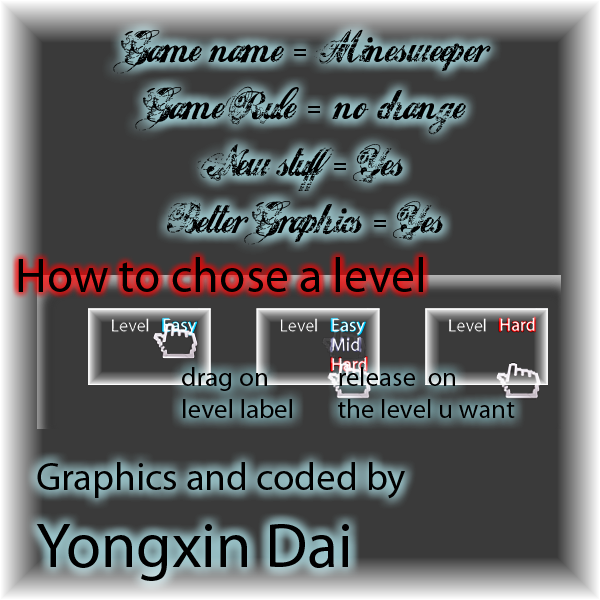
<style>
.page{position:relative;width:600px;height:600px;background:#3a3a3a}
.page>*{position:absolute;margin:0}
.t1{font:47.6px "Hawaii-Killer";color:#000000}
.t2{font:38.7px "MyriadPro-Regular";color:#000000}
.t3{font:63.8px "MyriadPro-Regular";color:#000000}
.t4{font:48.2px "MyriadPro-Regular";color:#000000}
.t5{font:27px "MyriadPro-Regular";color:#000000}
.t6{font:26.9px "MyriadPro-Regular";color:#000000}
</style>
<div class="page">
<p class="t1" style="left:36px;top:29px;width:455px;height:552px;text-align:center">Game name = Minesweeper<br>Game Rule = no change<br>New stuff = Yes<br>Better Graphics = Yes<br><br><br><br><br><span class="t2">Graphics and coded by </span><span class="t3">Yongxin Dai</span></p>
<p class="t4" style="left:18px;top:257px;width:405px;height:35px">How to chose a level</p>
<p class="t5" style="left:182px;top:367px;width:110px;height:51px">drag on<br>level label</p>
<p class="t6" style="left:338px;top:367px;width:177px;height:51px">release  on <br>the level u want</p>
</div>
